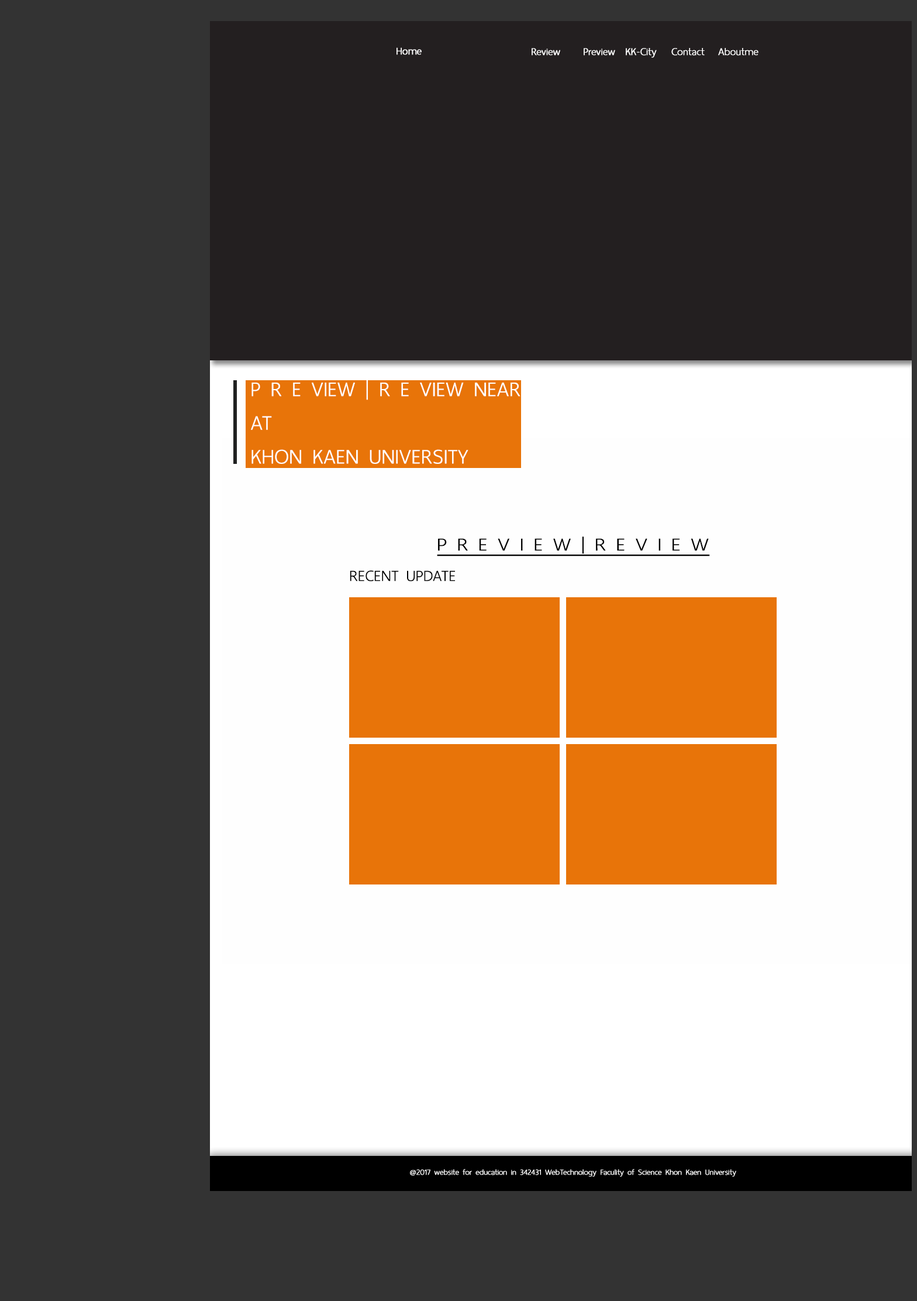
<style>
.page{position:relative;width:917px;height:1301px;background:#333333}
.page>*{position:absolute;margin:0}
.t1{font:14px "ThaiSansNeue-ExtraLight";color:#ffffff;font-weight:bold}
.t2{font:28.1px "ThaiSansNeue-ExtraLight";color:#ffffff;font-weight:bold}
.t3{font:24.6px "ThaiSansNeue-ExtraLight";color:#000000;font-weight:bold;text-decoration:underline;scale:1.14 1}
.t4{font:21.1px "ThaiSansNeue-ExtraLight";color:#000000;font-weight:bold}
.t5{font:10.5px "ThaiSansNeue-ExtraLight";color:#ffffff;font-weight:bold}
</style>
<div class="page">
<p class="t1" style="left:396px;top:47px;width:26px;height:8px">Home</p>
<p class="t1" style="left:532px;top:48px;width:28px;height:8px">Review</p>
<p class="t1" style="left:584px;top:48px;width:31px;height:8px">Preview</p>
<p class="t1" style="left:626px;top:48px;width:31px;height:10px">KK-City</p>
<p class="t1" style="left:671px;top:48px;width:34px;height:8px">Contact</p>
<p class="t1" style="left:718px;top:48px;width:40px;height:8px">Aboutme</p>
<p class="t2" style="left:251px;top:380px;width:269px;height:84px">P R E VIEW | R E VIEW NEAR <br>AT<br>KHON KAEN UNIVERSITY</p>
<p class="t3" style="left:437px;top:536px;width:273px;height:20px">P R E V I E W | R E V I E W</p>
<p class="t4" style="left:350px;top:570px;width:105px;height:11px">RECENT UPDATE</p>
<p class="t5" style="left:410px;top:1168px;width:326px;height:9px">@2017 website for education in 342431 WebTechnology Faculity of Science Khon Kaen University</p>
</div>
